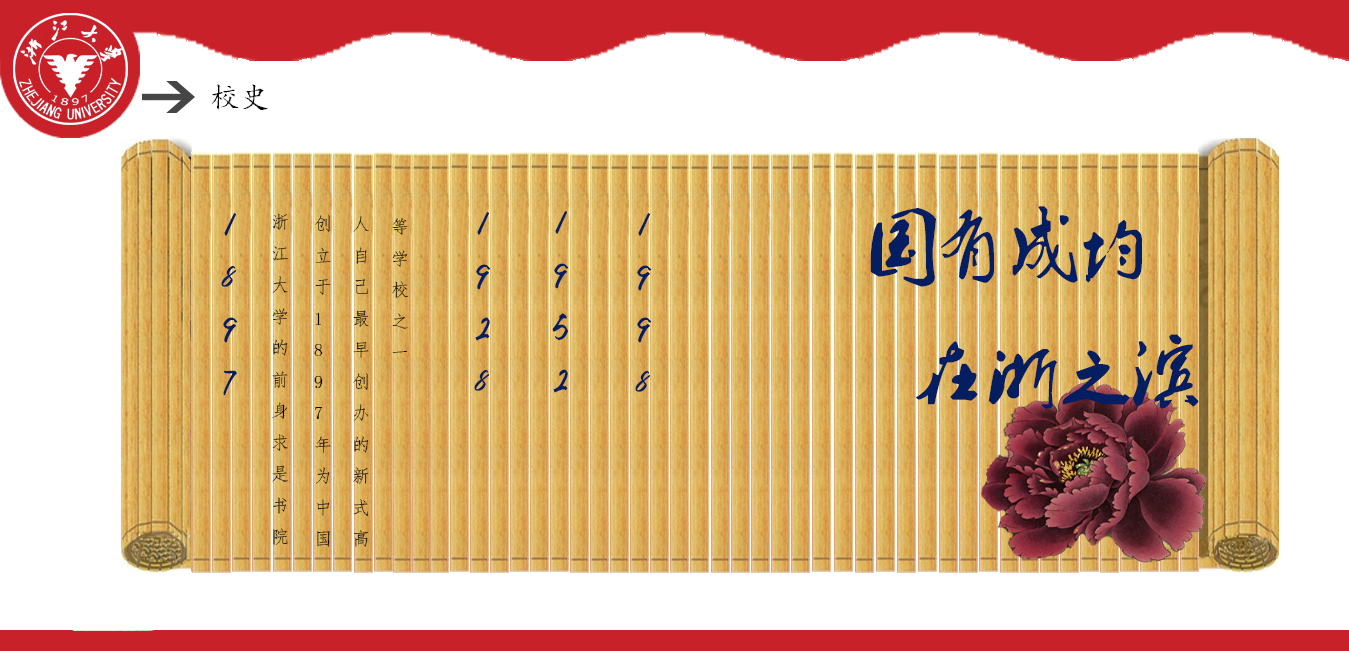
<style>
.page{position:relative;width:1349px;height:651px;background:#ffffff}
.page>*{position:absolute;margin:0}
.t1{font:30px "¿¬Ìå";color:#070707}
.t2{font:72px "Ò¶¸ùÓÑÃ«±ÊÐÐÊé¼òÌå";color:#051e61}
.t3{font:30px "Ò¶¸ùÓÑÌØÉ«¼òÌåÉý¼¶°æ";color:#051e61}
.t4{font:18px "·ÂËÎ";color:#040404}
</style>
<div class="page">
<p class="t1" style="left:211px;top:84px;width:57px;height:26px">校史</p>
<p class="t2" style="left:870px;top:206px;width:329px;height:203px">国有成均<br>  在浙之滨</p>
<p class="t3" style="left:221px;top:213px;width:17px;height:183px">1<br>8<br>9<br>7</p>
<p class="t4" style="left:272px;top:213px;width:16px;height:332px">浙<br>江<br>大<br>学<br>的<br>前<br>身<br>求<br>是<br>书<br>院</p>
<p class="t4" style="left:314px;top:215px;width:17px;height:332px">创<br>立<br>于<br>1<br>8<br>9<br>7<br>年<br>为<br>中<br>国</p>
<p class="t4" style="left:353px;top:215px;width:16px;height:332px">人<br>自<br>己<br>最<br>早<br>创<br>办<br>的<br>新<br>式<br>高</p>
<p class="t4" style="left:392px;top:218px;width:17px;height:135px">等<br>学<br>校<br>之<br>一</p>
<p class="t3" style="left:474px;top:212px;width:17px;height:179px">1<br>9<br>2<br>8</p>
<p class="t3" style="left:552px;top:211px;width:17px;height:182px">1<br>9<br>5<br>2</p>
<p class="t3" style="left:635px;top:213px;width:17px;height:179px">1<br>9<br>9<br>8</p>
</div>
